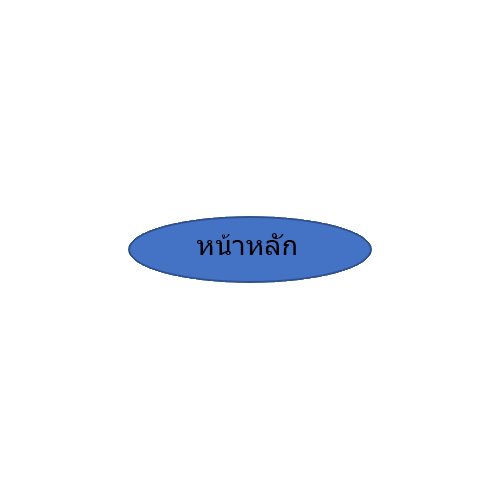
<style>
.page{position:relative;width:500px;height:500px;background:#ffffff}
.page>*{position:absolute;margin:0}
.t1{font:28px "Tahoma";color:#000000}
</style>
<div class="page">
<p class="t1" style="left:196px;top:233px;width:100px;height:22px">หน้าหลัก</p>
</div>
